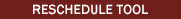
<style>
.page{position:relative;width:181px;height:19px;background:#6f201c}
.page>*{position:absolute;margin:0}
.t1{font:14px "FranklinGothic-Medium";color:#ffffff}
</style>
<div class="page">
<p class="t1" style="left:33px;top:4px;width:115px;height:11px">RESCHEDULE TOOL</p>
</div>
